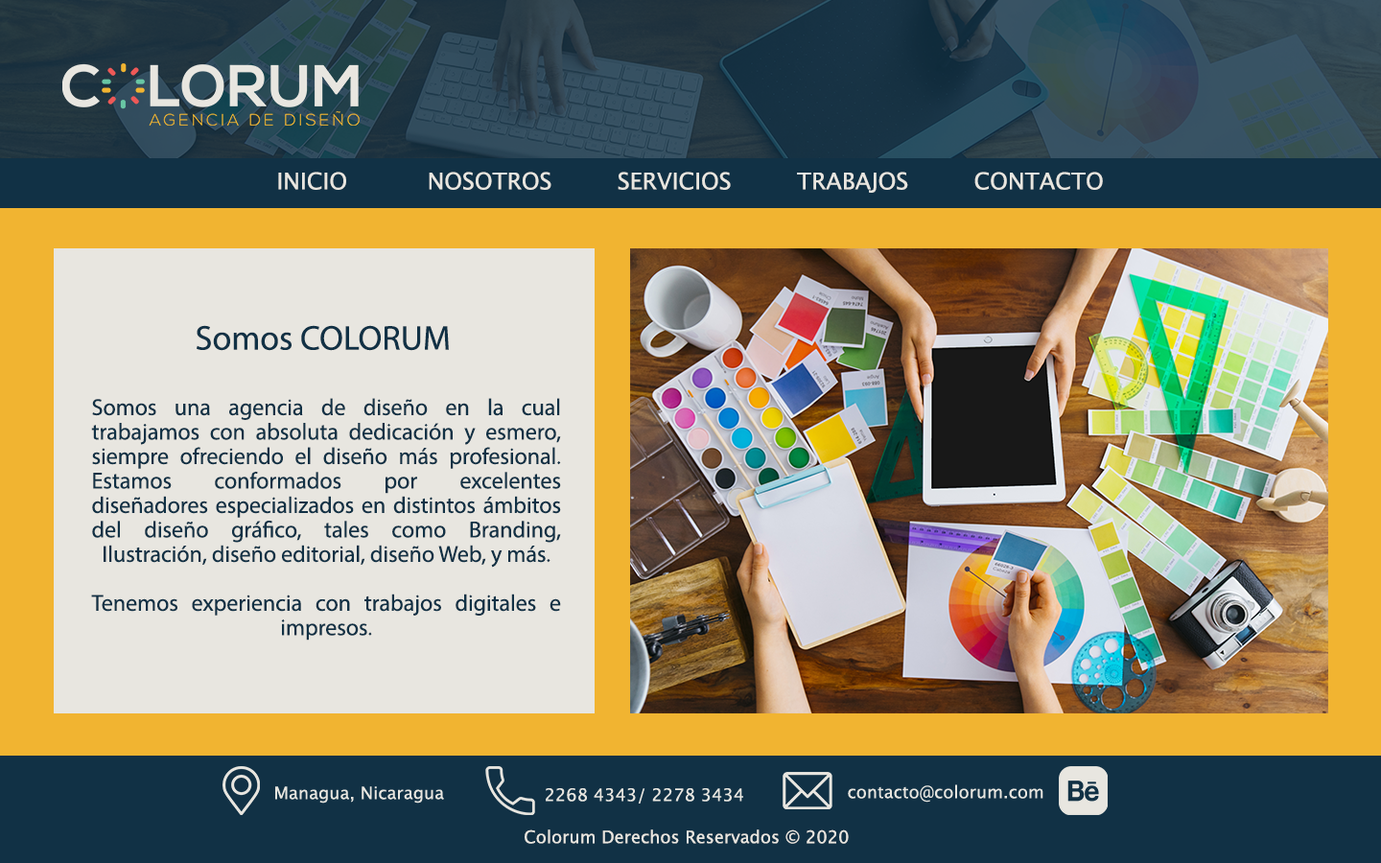
<style>
.page{position:relative;width:1381px;height:863px}
.page>*{position:absolute;margin:0}
.t1{font:23px "LucidaGrande";color:#e8e6e0}
.t2{font:34.5px "MyriadPro-Regular";color:#113145}
.t3{font:23px/24.5px "MyriadPro-Regular";color:#113145}
.t4{font:17.3px "LucidaGrande";color:#e8e6e0}
</style>
<div class="page">
<p class="t1" style="left:278px;top:172px;width:825px;height:21px">INICIO           NOSOTROS         SERVICIOS         TRABAJOS         CONTACTO</p>
<p class="t2" style="left:197px;top:325px;width:252px;height:26px">Somos COLORUM</p>
<p class="t3" style="left:91px;top:398px;width:470px;height:243px;text-align:justify">Somos una agencia de diseño en la cual <br>trabajamos con absoluta dedicación y esmero, siempre ofreciendo el diseño más profesional. <br>Estamos conformados por excelentes diseñadores especializados en distintos ámbitos del diseño gráfico, tales como Branding, <br>Ilustración, diseño editorial, diseño Web, y más.<br><br>Tenemos experiencia con trabajos digitales e <br>impresos.</p>
<p class="t4" style="left:525px;top:830px;width:324px;height:14px">Colorum Derechos Reservados © 2020</p>
</div>
